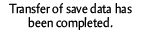
<style>
.page{position:relative;width:142px;height:32px;background:#ffffff}
.page>*{position:absolute;margin:0}
.t1{font:13.2px "Amira-Roman";color:#000000;scale:0.91 1}
</style>
<div class="page">
<p class="t1" style="left:9px;top:3px;width:123px;height:27px;text-align:center">Transfer of save data has been completed.</p>
</div>
